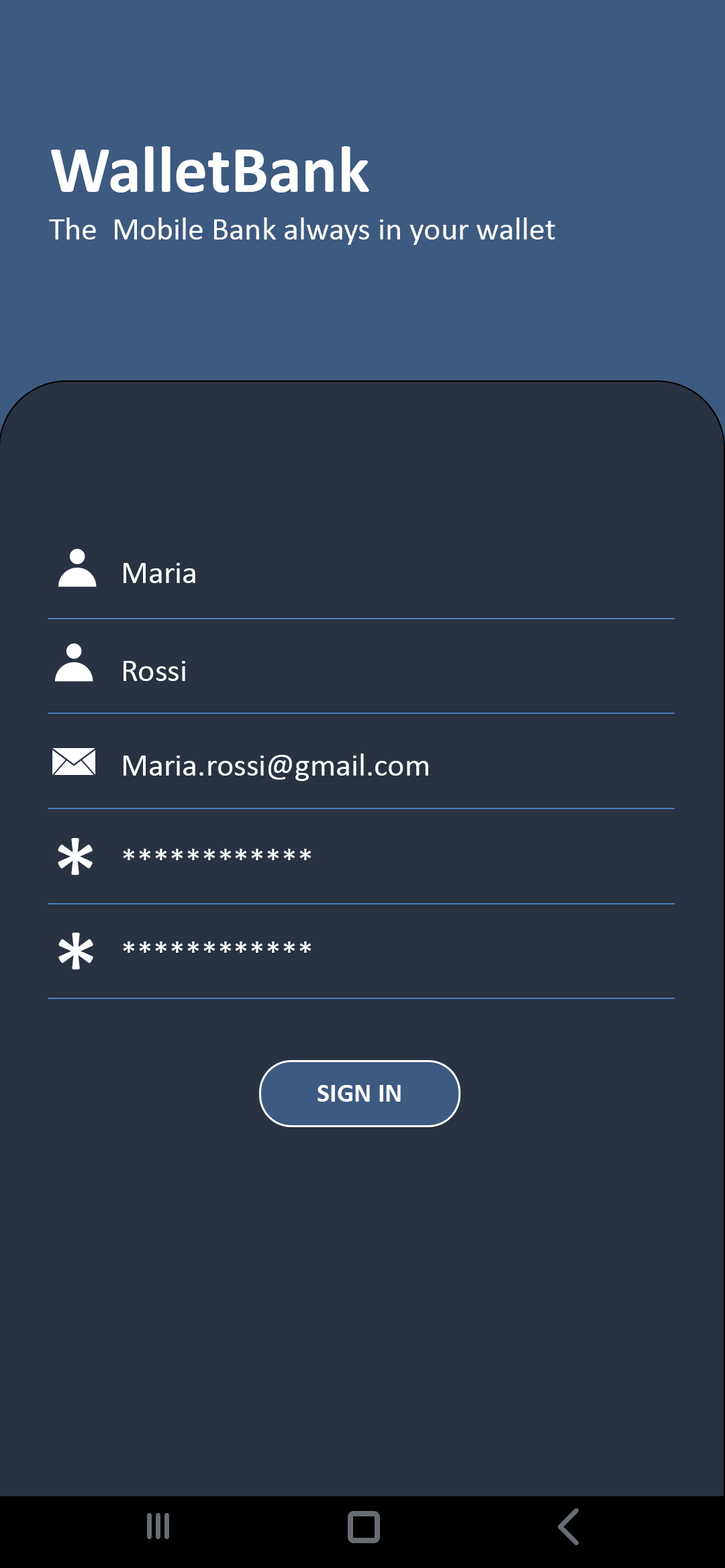
<style>
.page{position:relative;width:725px;height:1568px;background:#293241}
.page>*{position:absolute;margin:0}
.t1{font:67.1px "Calibri-Bold";color:#ffffff}
.t2{font:32.2px "Calibri";color:#ffffff}
.t3{font:32.2px "Calibri";color:#fefefe}
.t4{font:100.6px "Calibri";color:#ffffff}
.t5{font:26.8px "Calibri-Bold";color:#ffffff}
</style>
<div class="page">
<p class="t1" style="left:51px;top:146px;width:318px;height:47px">WalletBank</p>
<p class="t2" style="left:49px;top:217px;width:506px;height:28px">The  Mobile Bank always in your wallet</p>
<p class="t2" style="left:123px;top:563px;width:72px;height:20px">Maria</p>
<p class="t2" style="left:123px;top:661px;width:62px;height:20px">Rossi</p>
<p class="t3" style="left:123px;top:753px;width:305px;height:28px">Maria.rossi@gmail.com</p>
<p class="t4" style="left:58px;top:838px;width:35px;height:37px">*</p>
<p class="t2" style="left:123px;top:849px;width:188px;height:11px">************</p>
<p class="t4" style="left:58px;top:933px;width:35px;height:37px">*</p>
<p class="t2" style="left:123px;top:941px;width:188px;height:12px">************</p>
<p class="t5" style="left:317px;top:1085px;width:84px;height:17px">SIGN IN</p>
</div>
